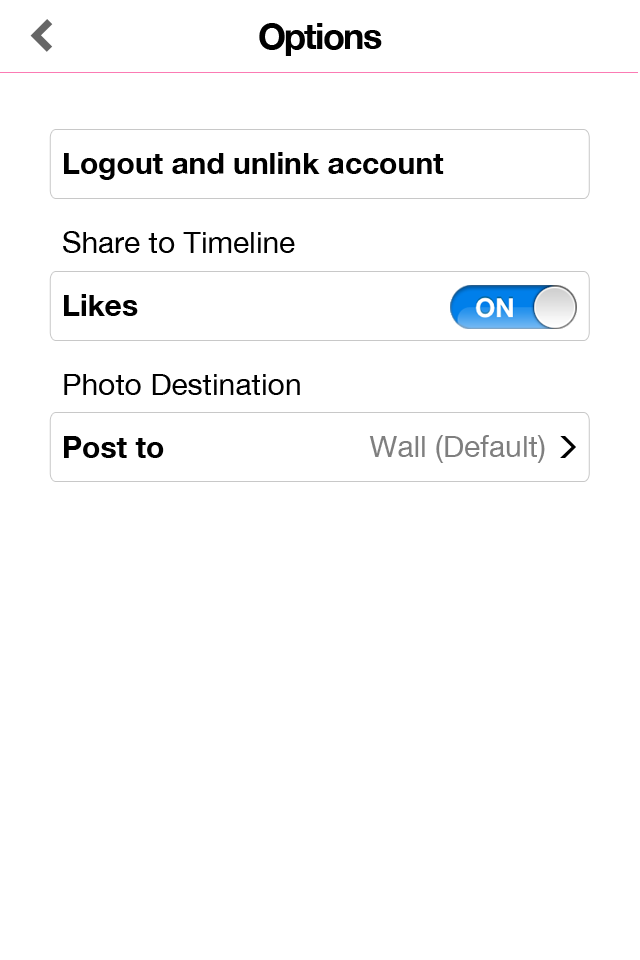
<style>
.page{position:relative;width:640px;height:960px;background:#ffffff}
.page>*{position:absolute;margin:0}
.t1{font:36px "HelveticaNeue-Bold";letter-spacing:-0.05em;color:#000000}
.t2{font:30px "HelveticaNeue-Bold";color:#000000}
.t3{font:30px "HelveticaNeue";color:#000000}
.t4{font:30px "HelveticaNeue";color:#7f7f7f}
</style>
<div class="page">
<p class="t1" style="left:259px;top:23px;width:123px;height:33px">Options</p>
<p class="t2" style="left:64px;top:152px;width:380px;height:28px">Logout and unlink account</p>
<p class="t3" style="left:63px;top:231px;width:232px;height:22px">Share to Timeline</p>
<p class="t2" style="left:64px;top:294px;width:74px;height:22px">Likes</p>
<p class="t3" style="left:64px;top:374px;width:236px;height:21px">Photo Destination</p>
<p class="t2" style="left:64px;top:436px;width:100px;height:22px">Post to</p>
<p class="t4" style="left:369px;top:435px;width:176px;height:28px">Wall (Default)</p>
</div>
